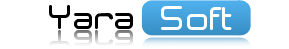
<style>
.page{position:relative;width:289px;height:49px;background:#ffffff}
.page>*{position:absolute;margin:0}
.t1{font:30px "Neogrey-Medium";color:#000000}
.t2{font:30px "Neogrey-Medium";color:#ffffff}
</style>
<div class="page">
<p class="t1" style="left:49px;top:5px;width:84px;height:24px">Yara</p>
<p class="t2" style="left:161px;top:6px;width:71px;height:24px">Soft</p>
</div>
